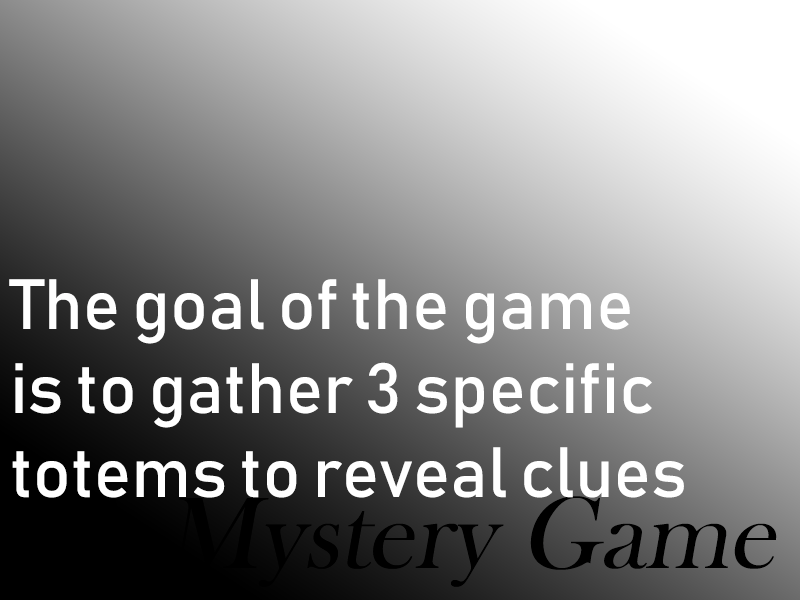
<style>
.page{position:relative;width:800px;height:600px}
.page>*{position:absolute;margin:0}
.t1{font:70px "Bahnschrift";color:#ffffff;font-style:italic}
.t2{font:105px "BaskOldFace";color:#000000;font-style:italic}
</style>
<div class="page">
<p class="t1" style="left:9px;top:279px;width:675px;height:219px">The goal of the game<br>is to gather 3 specific<br>totems to reveal clues</p>
<p class="t2" style="left:65px;top:496px;width:712px;height:91px">A Mystery Game</p>
</div>
